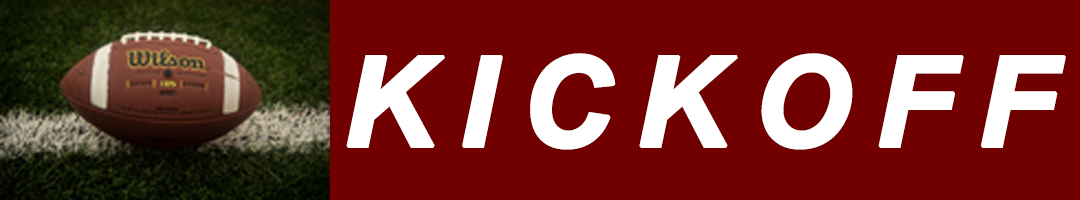
<style>
.page{position:relative;width:1080px;height:200px;background:#710000}
.page>*{position:absolute;margin:0}
.t1{font:125px/200px "Arial-BoldItalicMT";letter-spacing:0.18em;color:#ffffff;text-transform:uppercase;font-weight:bold}
</style>
<div class="page">
<p class="t1" style="left:346px;top:53px;width:720px;height:97px">KICKOFF <br>KiKK</p>
</div>
